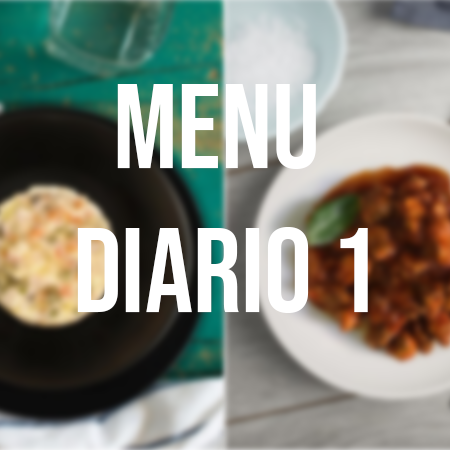
<style>
.page{position:relative;width:450px;height:450px}
.page>*{position:absolute;margin:0}
.t1{font:120px "BebasNeue-Regular";color:#ffffff}
</style>
<div class="page">
<p class="t1" style="left:77px;top:84px;width:291px;height:229px;text-align:center">MENU <br>DIARIO 1</p>
</div>
